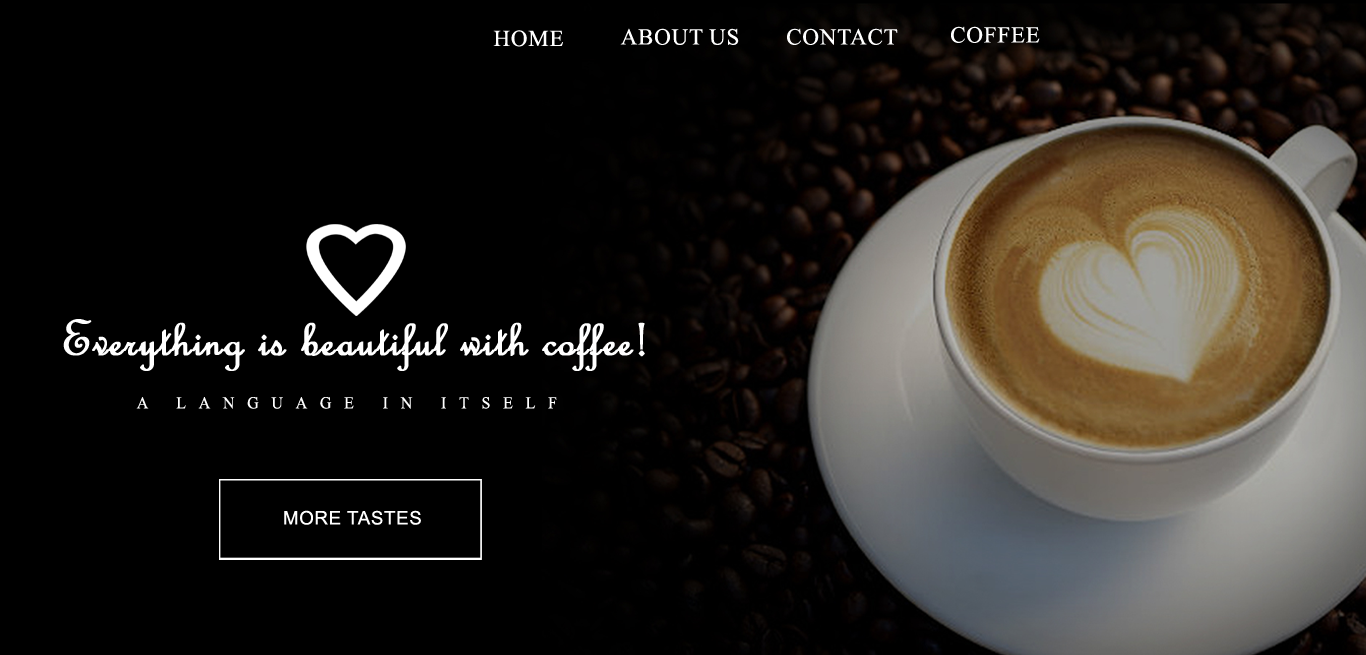
<style>
.page{position:relative;width:1366px;height:655px;background:#000000}
.page>*{position:absolute;margin:0}
.t1{font:23px "TimesNewRomanPSMT";color:#ffffff;text-transform:uppercase}
.t2{font:53.7px "FrenchScriptMT";color:#ffffff;font-weight:bold}
.t3{font:16.7px "TimesNewRomanPSMT";letter-spacing:0.76em;color:#ffffff;text-transform:uppercase;scale:0.95 1}
.t4{font:18.7px "ArialMT";color:#ffffff;text-transform:uppercase}
</style>
<div class="page">
<p class="t1" style="left:493px;top:30px;width:70px;height:17px">Home</p>
<p class="t1" style="left:620px;top:28px;width:119px;height:17px">About us</p>
<p class="t1" style="left:787px;top:28px;width:111px;height:17px">contact</p>
<p class="t1" style="left:951px;top:26px;width:89px;height:17px">coffee</p>
<p class="t2" style="left:63px;top:319px;width:582px;height:52px">Everything is beautiful with coffee!</p>
<p class="t3" style="left:136px;top:397px;width:421px;height:12px">A language in itself</p>
<p class="t4" style="left:284px;top:510px;width:137px;height:15px">More tastes</p>
</div>
